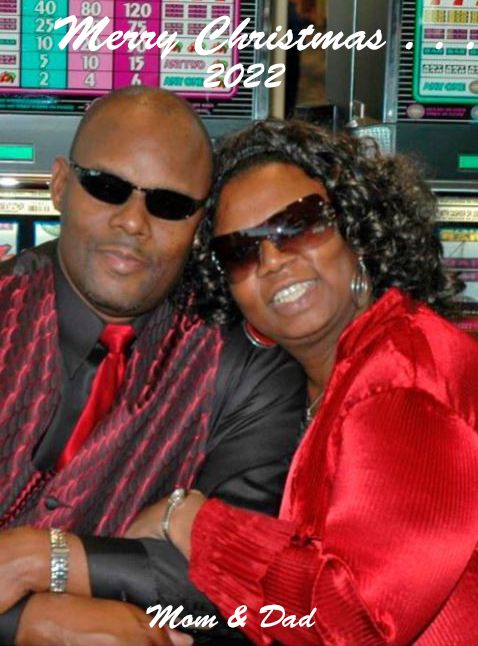
<style>
.page{position:relative;width:478px;height:646px}
.page>*{position:absolute;margin:0}
.t1{font:48px "BrushScriptStd";color:#ffffff}
.t2{font:36px "BrushScriptStd";color:#ffffff}
.t3{font:32px "BrushScriptStd";color:#ffffff}
</style>
<div class="page">
<p class="t1" style="left:54px;top:15px;width:420px;height:45px">Merry Christmas . . .</p>
<p class="t2" style="left:203px;top:63px;width:83px;height:25px">2022</p>
<p class="t3" style="left:146px;top:604px;width:171px;height:25px">Mom &amp; Dad</p>
</div>
